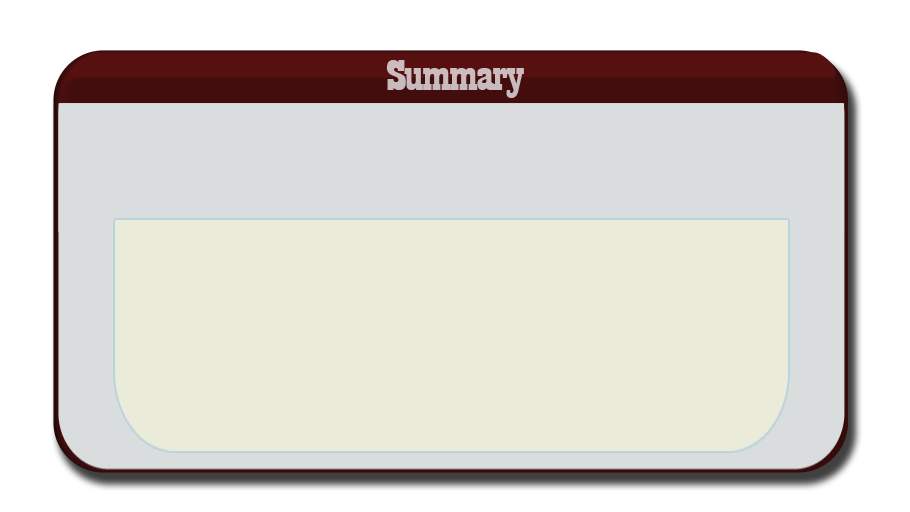
<style>
.page{position:relative;width:910px;height:512px;background:#eaebd8}
.page>*{position:absolute;margin:0}
.t1{font:44.6px "Playbill";letter-spacing:-0.025em;color:#c8bbbe;scale:1.61 1}
</style>
<div class="page">
<p class="t1" style="left:386px;top:60px;width:138px;height:38px">Summary</p>
</div>
